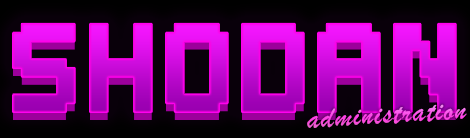
<style>
.page{position:relative;width:470px;height:138px;background:#09000a}
.page>*{position:absolute;margin:0}
.t1{font:141px "Super-Smash-TV";letter-spacing:0.04em}
.t2{font:31px "BrushScriptMT";letter-spacing:0.04em;color:#fb4ce6}
</style>
<div class="page">
<p class="t1" style="left:13px;top:23px;width:443px;height:89px">Shodan</p>
<p class="t2" style="left:307px;top:104px;width:160px;height:24px;rotate:-3deg">administration</p>
</div>
